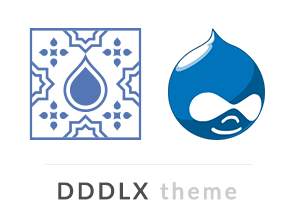
<style>
.page{position:relative;width:294px;height:219px;background:#ffffff}
.page>*{position:absolute;margin:0}
.t1{font:22.6px "Lato-Regular";letter-spacing:0.118em;color:#4d4d4d;font-weight:bold}
.t2{font:22.6px "Lato-Regular";letter-spacing:0.118em;color:#cccccc;font-weight:bold}
</style>
<div class="page">
<p class="t1" style="left:58px;top:182px;width:179px;height:18px">DDDLX <span class="t2">theme</span></p>
</div>
